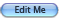
<style>
.page{position:relative;width:59px;height:18px}
.page>*{position:absolute;margin:0}
.t1{font:9px "LucidaSansUnicode";color:#24303d}
</style>
<div class="page">
<p class="t1" style="left:15px;top:6px;width:31px;height:7px">Edit Me</p>
</div>
